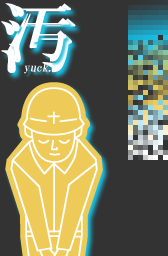
<style>
.page{position:relative;width:168px;height:256px;background:#333333}
.page>*{position:absolute;margin:0}
.t1{font:12px/16px "HGMinchoB";color:#ffffff;font-style:italic}
.t2{font:65px/16px "HGMinchoB";letter-spacing:0.075em;color:#ffffff}
</style>
<div class="page">
<p class="t1" style="left:8px;top:5px;width:62px;height:69px;text-align:center"><span class="t2">汚<br></span>yuck.</p>
</div>
